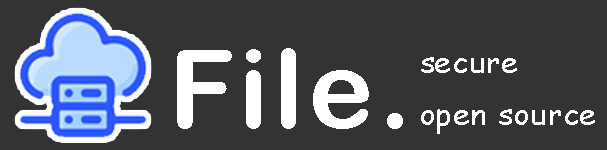
<style>
.page{position:relative;width:607px;height:150px;background:#333333}
.page>*{position:absolute;margin:0}
.t1{font:110px "ArialRoundedMTBold";letter-spacing:0.04em;color:#ffffff}
.t2{font:30px "ComicSansMS";letter-spacing:0.04em;color:#ffffff}
</style>
<div class="page">
<p class="t1" style="left:177px;top:48px;width:226px;height:81px">File.</p>
<p class="t2" style="left:421px;top:57px;width:174px;height:77px">secure<br>open source</p>
</div>
